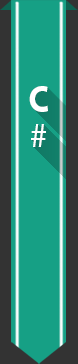
<style>
.page{position:relative;width:78px;height:364px;background:#16a085}
.page>*{position:absolute;margin:0}
.t1{font:35.3px "LoveloBlack";color:#ffffff}
.t2{font:35.3px "MyriadPro-Regular";color:#ffffff}
</style>
<div class="page">
<p class="t1" style="left:29px;top:86px;width:19px;height:61px;text-align:center">c<span class="t2">#</span></p>
</div>
